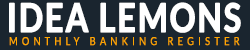
<style>
.page{position:relative;width:250px;height:50px;background:#1a252f}
.page>*{position:absolute;margin:0}
.t1{font:39.4px "Lato-Bold";letter-spacing:0.04em;color:#ffffff;font-weight:bold;scale:0.81 1}
.t2{font:11.5px "Lato-Regular";letter-spacing:0.42em;color:#ffa500;font-weight:bold;scale:0.81 1}
</style>
<div class="page">
<p class="t1" style="left:9px;top:2px;width:232px;height:31px">IDEA LEMONS</p>
<p class="t2" style="left:9px;top:37px;width:231px;height:9px">MONTHLY BANKING REGISTER</p>
</div>
